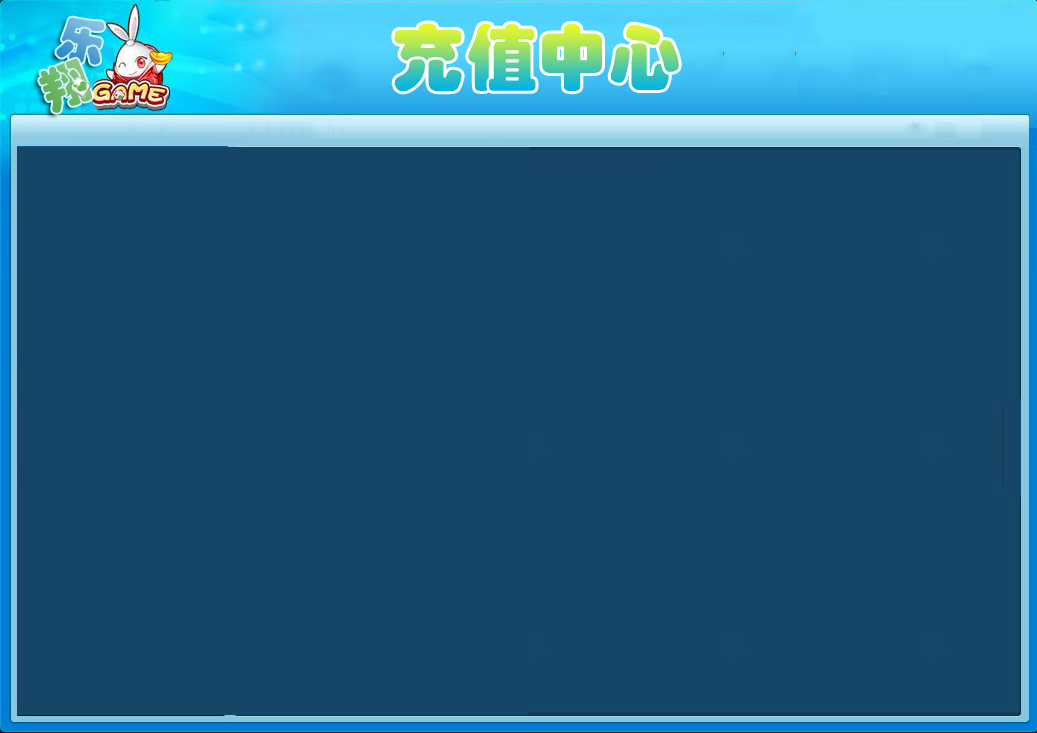
<style>
.page{position:relative;width:1037px;height:733px;background:#154667}
.page>*{position:absolute;margin:0}
.t1{font:72px "STHupo"}
</style>
<div class="page">
<p class="t1" style="left:394px;top:23px;width:285px;height:69px">充值中心</p>
</div>
